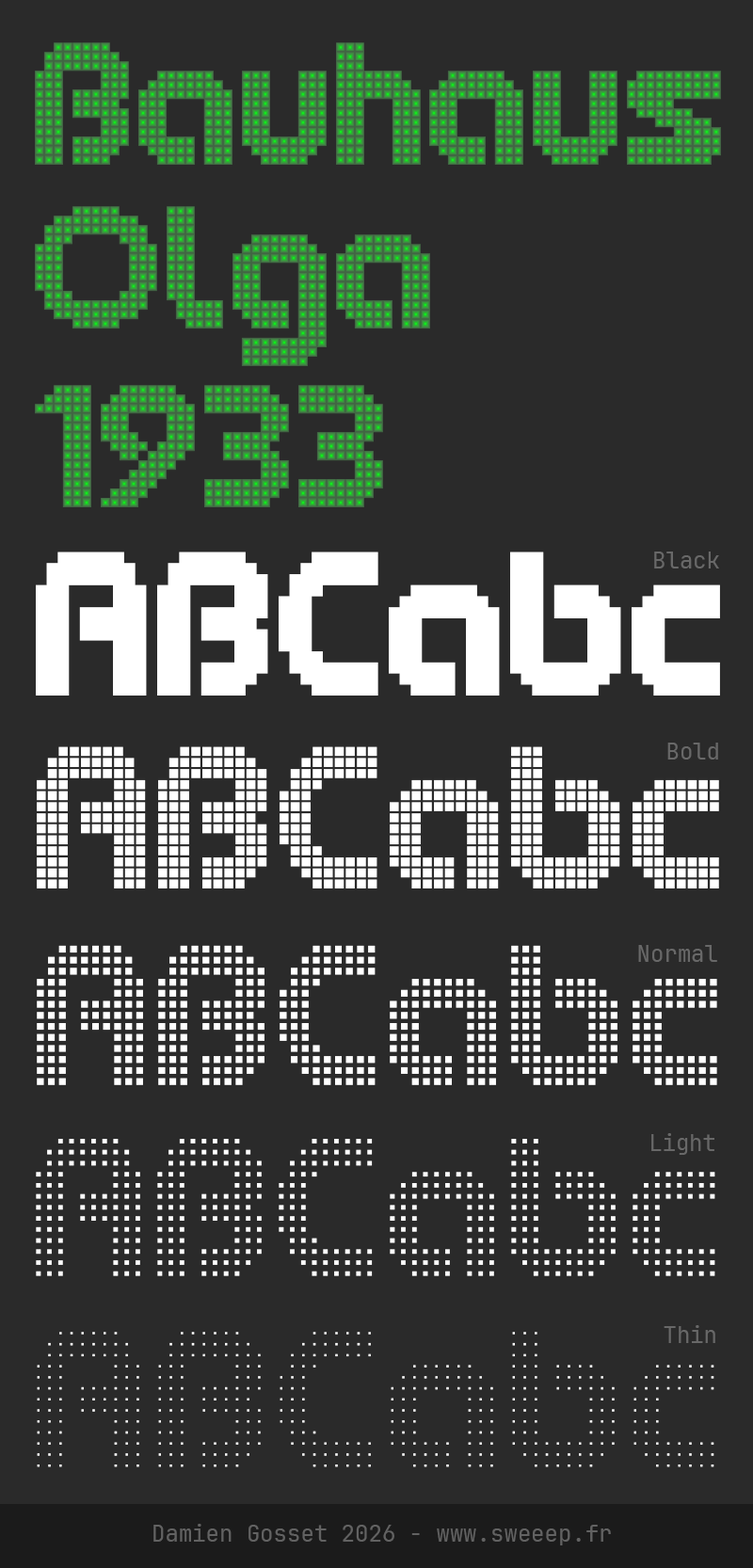
<style>
.page{position:relative;width:753px;height:1568px;background:#2a2a2a}
.page>*{position:absolute;margin:0}
.t1{font:197.3px/164.4px "BauhausOlga1933Black"}
.t2{font:197.3px/178.8px "BauhausOlga1933Black"}
.t3{font:197.3px/164.4px "BauhausOlga1933Bold"}
.t4{font:197.3px/178.8px "BauhausOlga1933Bold"}
.t5{font:197.3px/164.4px "BauhausOlga1933Normal"}
.t6{font:197.3px/178.8px "BauhausOlga1933Normal"}
.t7{font:197.3px/164.4px "BauhausOlga1933Light";color:#25bb2d}
.t8{font:197.3px/178.8px "BauhausOlga1933Light";color:#25bb2d}
.t9{font:197.3px/164.4px "BauhausOlga1933Thin";color:#0ff01b}
.t10{font:197.3px/178.8px "BauhausOlga1933Thin";color:#0ff01b}
.t11{font:231.8px "BauhausOlga1933Black";color:#ffffff}
.t12{font:22.6px "JetBrainsMonoNFP-Regular";color:#686868}
.t13{font:231.8px "BauhausOlga1933Bold";color:#ffffff}
.t14{font:231.8px "BauhausOlga1933Normal";color:#ffffff}
.t15{font:231.8px "BauhausOlga1933Light";color:#ffffff}
.t16{font:231.8px "BauhausOlga1933Thin";color:#ffffff}
.t17{font:22.6px "JetBrainsMonoNFP-Regular";color:#626262}
</style>
<div class="page">
<p class="t1" style="left:35px;top:42px;width:686px;height:465px">Bauhaus<br>Olga<span class="t2"><br>1933</span></p>
<p class="t3" style="left:35px;top:42px;width:685px;height:464px">Bauhaus<br>Olga<span class="t4"><br>1933</span></p>
<p class="t5" style="left:36px;top:44px;width:683px;height:462px">Bauhaus<br>Olga<span class="t6"><br>1933</span></p>
<p class="t7" style="left:37px;top:45px;width:681px;height:460px">Bauhaus<br>Olga<span class="t8"><br>1933</span></p>
<p class="t9" style="left:39px;top:46px;width:678px;height:458px">Bauhaus<br>Olga<span class="t10"><br>1933</span></p>
<p class="t11" style="left:36px;top:552px;width:684px;height:144px">ABCabc</p>
<p class="t12" style="left:654px;top:552px;width:65px;height:16px">Black</p>
<p class="t13" style="left:37px;top:746px;width:682px;height:142px">ABCabc</p>
<p class="t12" style="left:667px;top:743px;width:51px;height:17px">Bold</p>
<p class="t14" style="left:37px;top:945px;width:680px;height:140px">ABCabc</p>
<p class="t12" style="left:638px;top:945px;width:79px;height:17px">Normal</p>
<p class="t12" style="left:651px;top:1133px;width:63px;height:22px">Light</p>
<p class="t15" style="left:36px;top:1139px;width:679px;height:137px">ABCabc</p>
<p class="t12" style="left:664px;top:1325px;width:51px;height:18px">Thin</p>
<p class="t16" style="left:37px;top:1332px;width:677px;height:135px">ABCabc</p>
<p class="t17" style="left:153px;top:1524px;width:458px;height:21px">Damien Gosset 2026 - www.sweeep.fr</p>
</div>
